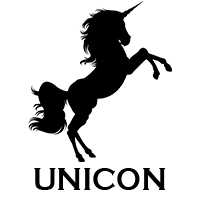
<style>
.page{position:relative;width:200px;height:200px;background:#ffffff}
.page>*{position:absolute;margin:0}
.t1{font:33.3px "CopperplateGothic-Bold";color:#000000;scale:0.88 1}
</style>
<div class="page">
<p class="t1" style="left:34px;top:168px;width:132px;height:22px">UNICON</p>
</div>
